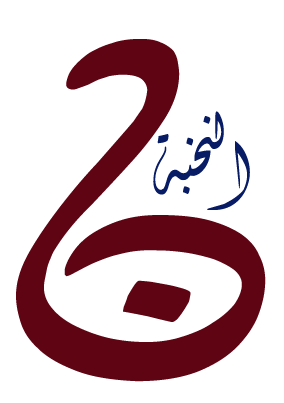
<style>
.page{position:relative;width:284px;height:403px;background:#ffffff}
.page>*{position:absolute;margin:0}
.t1{font:384.9px "majdy70";color:#5f0413;scale:1.89 1}
.t2{font:72px "majdy70";color:#081b65}
</style>
<div class="page">
<p class="t1" style="left:16px;top:39px;width:250px;height:343px">ن</p>
<p class="t2" style="left:153px;top:111px;width:97px;height:99px">النخبة</p>
</div>
